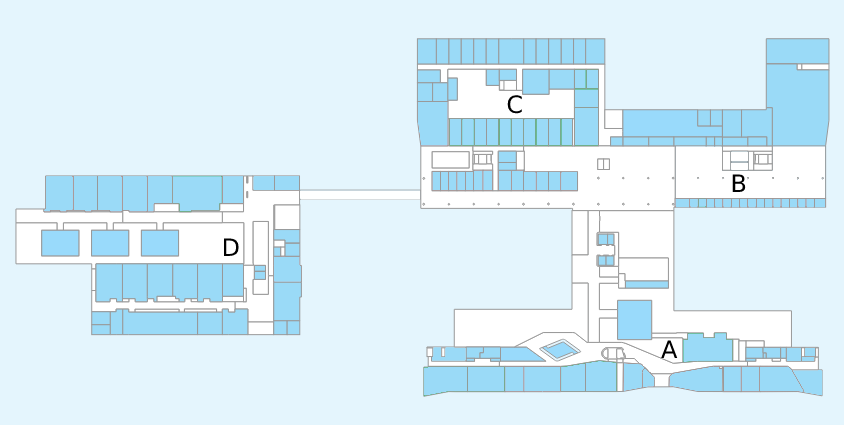
<style>
.page{position:relative;width:844px;height:425px;background:#e4f5fd}
.page>*{position:absolute;margin:0}
.t1{font:24px "DejaVuSans";color:#000000}
</style>
<div class="page">
<p class="t1" style="left:507px;top:95px;width:15px;height:19px">C</p>
<p class="t1" style="left:732px;top:174px;width:14px;height:18px">B</p>
<p class="t1" style="left:223px;top:238px;width:16px;height:18px">D</p>
<p class="t1" style="left:661px;top:340px;width:17px;height:18px">A</p>
</div>
